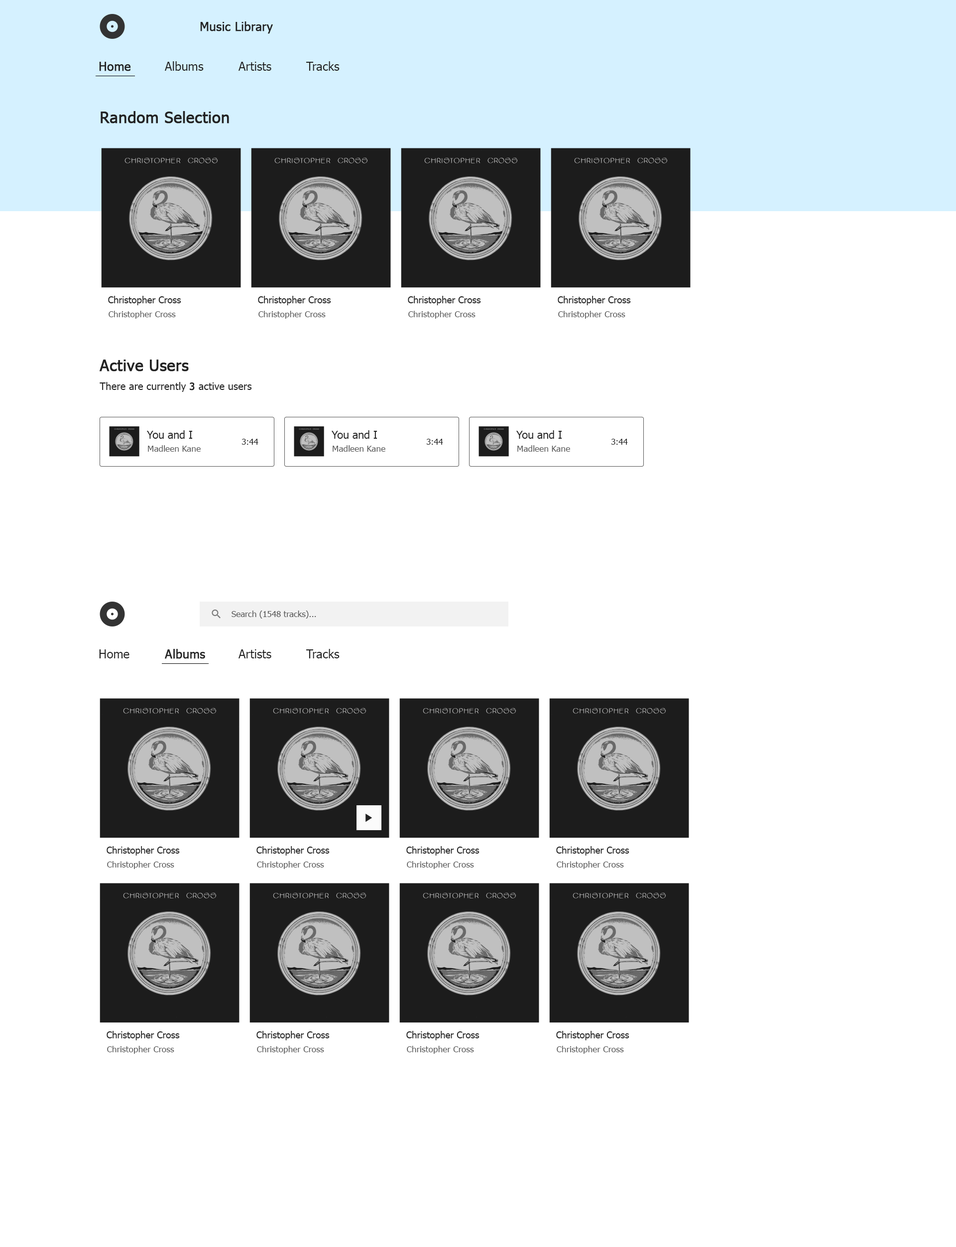
<style>
.page{position:relative;width:956px;height:1247px;background:#ffffff}
.page>*{position:absolute;margin:0}
.t1{font:12px "Tahoma";color:#222222;font-weight:bold}
.t2{font:12px "Tahoma";color:#222222}
.t3{font:15.6px "Tahoma";color:#222222;font-weight:bold}
.t4{font:9.4px "Tahoma";color:#222222}
.t5{font:8.7px "Tahoma";color:#555555}
.t6{font:10.2px "Tahoma";color:#222222}
.t7{font:10.2px "Tahoma";color:#222222;font-weight:bold}
.t8{font:10.8px "Tahoma";color:#222222}
.t9{font:8.3px "Tahoma";color:#222222}
.t10{font:8.5px "Tahoma";color:#555555}
</style>
<div class="page">
<p class="t1" style="left:200px;top:21px;width:73px;height:13px">Music Library</p>
<p class="t1" style="left:99px;top:62px;width:32px;height:9px">Home</p>
<p class="t2" style="left:165px;top:61px;width:39px;height:10px">Albums</p>
<p class="t2" style="left:239px;top:62px;width:32px;height:9px">Artists</p>
<p class="t2" style="left:306px;top:61px;width:34px;height:10px">Tracks</p>
<p class="t3" style="left:101px;top:111px;width:128px;height:13px">Random Selection</p>
<p class="t4" style="left:108px;top:296px;width:73px;height:9px">Christopher Cross</p>
<p class="t4" style="left:258px;top:296px;width:73px;height:9px">Christopher Cross</p>
<p class="t4" style="left:408px;top:296px;width:73px;height:9px">Christopher Cross</p>
<p class="t4" style="left:558px;top:296px;width:73px;height:9px">Christopher Cross</p>
<p class="t5" style="left:109px;top:311px;width:67px;height:8px">Christopher Cross</p>
<p class="t5" style="left:258px;top:311px;width:68px;height:8px">Christopher Cross</p>
<p class="t5" style="left:408px;top:311px;width:68px;height:8px">Christopher Cross</p>
<p class="t5" style="left:558px;top:311px;width:68px;height:8px">Christopher Cross</p>
<p class="t3" style="left:99px;top:360px;width:90px;height:12px">Active Users</p>
<p class="t6" style="left:100px;top:382px;width:152px;height:10px">There are currently <span class="t7">3 </span>active users</p>
<p class="t8" style="left:147px;top:430px;width:46px;height:9px">You and I</p>
<p class="t8" style="left:332px;top:430px;width:46px;height:9px">You and I</p>
<p class="t8" style="left:516px;top:430px;width:46px;height:9px">You and I</p>
<p class="t5" style="left:148px;top:445px;width:53px;height:7px">Madleen Kane</p>
<p class="t9" style="left:242px;top:439px;width:16px;height:6px">3:44</p>
<p class="t5" style="left:333px;top:445px;width:52px;height:7px">Madleen Kane</p>
<p class="t9" style="left:426px;top:439px;width:17px;height:6px">3:44</p>
<p class="t5" style="left:517px;top:445px;width:53px;height:7px">Madleen Kane</p>
<p class="t9" style="left:611px;top:439px;width:17px;height:6px">3:44</p>
<p class="t10" style="left:232px;top:611px;width:84px;height:8px">Search (1548 tracks)...</p>
<p class="t2" style="left:99px;top:649px;width:30px;height:9px">Home</p>
<p class="t1" style="left:165px;top:649px;width:40px;height:10px">Albums</p>
<p class="t2" style="left:239px;top:649px;width:32px;height:9px">Artists</p>
<p class="t2" style="left:306px;top:649px;width:34px;height:9px">Tracks</p>
<p class="t4" style="left:107px;top:846px;width:73px;height:10px">Christopher Cross</p>
<p class="t4" style="left:256px;top:846px;width:74px;height:10px">Christopher Cross</p>
<p class="t4" style="left:406px;top:846px;width:74px;height:10px">Christopher Cross</p>
<p class="t4" style="left:556px;top:846px;width:74px;height:10px">Christopher Cross</p>
<p class="t5" style="left:107px;top:861px;width:67px;height:8px">Christopher Cross</p>
<p class="t5" style="left:257px;top:861px;width:67px;height:8px">Christopher Cross</p>
<p class="t5" style="left:407px;top:861px;width:67px;height:8px">Christopher Cross</p>
<p class="t5" style="left:557px;top:861px;width:67px;height:8px">Christopher Cross</p>
<p class="t4" style="left:107px;top:1031px;width:73px;height:9px">Christopher Cross</p>
<p class="t4" style="left:256px;top:1031px;width:74px;height:9px">Christopher Cross</p>
<p class="t4" style="left:406px;top:1031px;width:74px;height:9px">Christopher Cross</p>
<p class="t4" style="left:556px;top:1031px;width:74px;height:9px">Christopher Cross</p>
<p class="t5" style="left:107px;top:1046px;width:67px;height:8px">Christopher Cross</p>
<p class="t5" style="left:257px;top:1046px;width:67px;height:8px">Christopher Cross</p>
<p class="t5" style="left:407px;top:1046px;width:67px;height:8px">Christopher Cross</p>
<p class="t5" style="left:557px;top:1046px;width:67px;height:8px">Christopher Cross</p>
</div>
